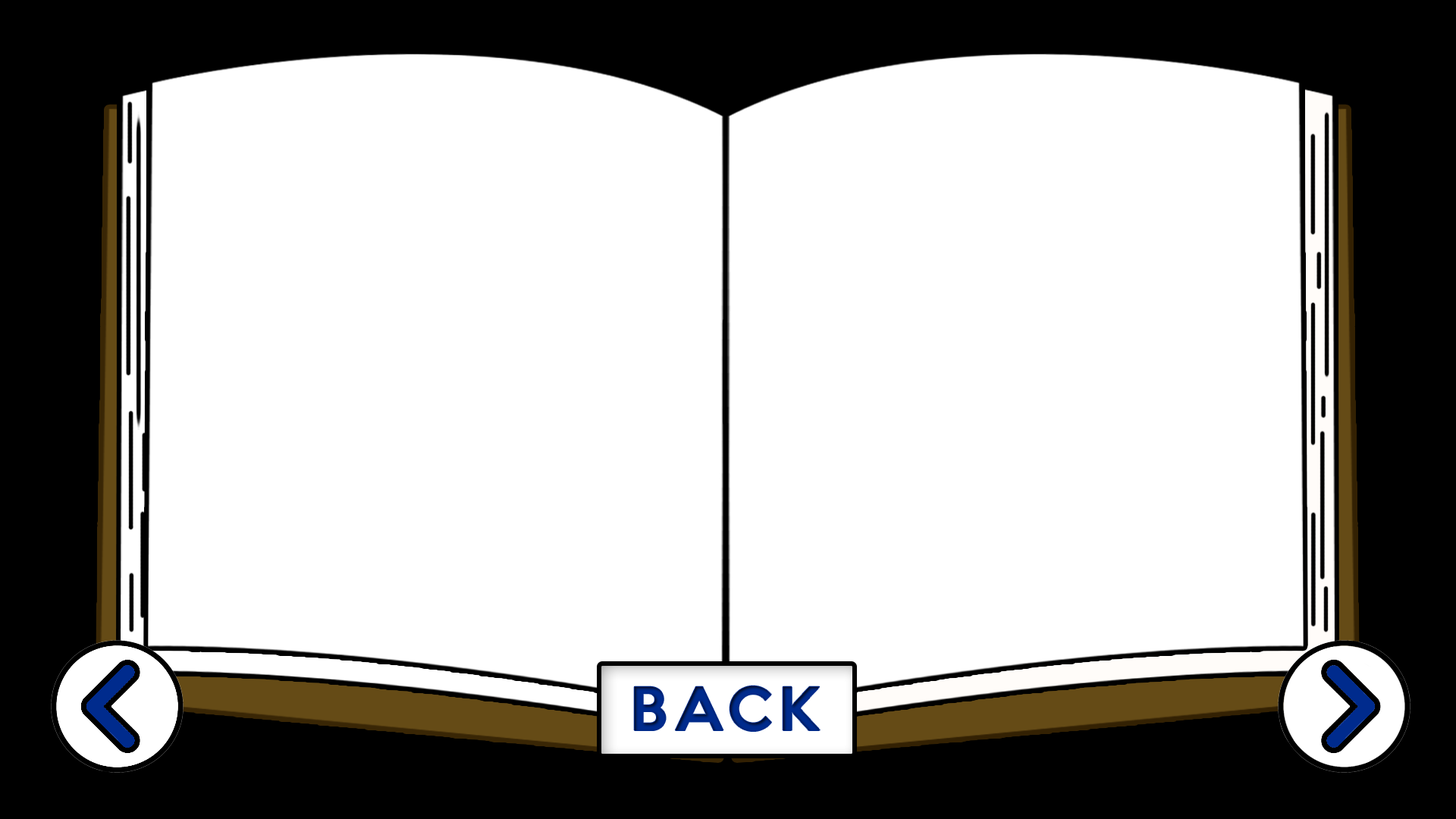
<style>
.page{position:relative;width:1456px;height:819px;background:#ffffff}
.page>*{position:absolute;margin:0}
.t1{font:54.2px "KeepCalm-Medium";letter-spacing:0.14em;color:#002988}
</style>
<div class="page">
<p class="t1" style="left:634px;top:686px;width:186px;height:45px">BACK</p>
</div>
